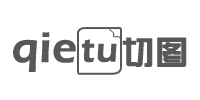
<style>
.page{position:relative;width:200px;height:100px;background:#ffffff}
.page>*{position:absolute;margin:0}
.t1{font:43px "ErasITC-Demi";color:#58585a;font-weight:bold}
.t2{font:43px "ErasITC-Demi";letter-spacing:0.025em;color:#58585a;font-weight:bold}
.t3{font:34.9px "ErasITC-Demi";letter-spacing:0.025em;color:#58585a;font-weight:bold}
.t4{font:34.9px "ErasITC-Demi";color:#58585a;font-weight:bold}
.t5{font:32.4px "ADZYJT--GB1-0";color:#58585a;font-weight:bold}
</style>
<div class="page">
<p class="t1" style="left:13px;top:32px;width:63px;height:40px">qi<span class="t2">e</span></p>
<p class="t3" style="left:82px;top:39px;width:35px;height:24px">t<span class="t4">u</span></p>
<p class="t5" style="left:122px;top:37px;width:65px;height:30px">切图</p>
</div>
